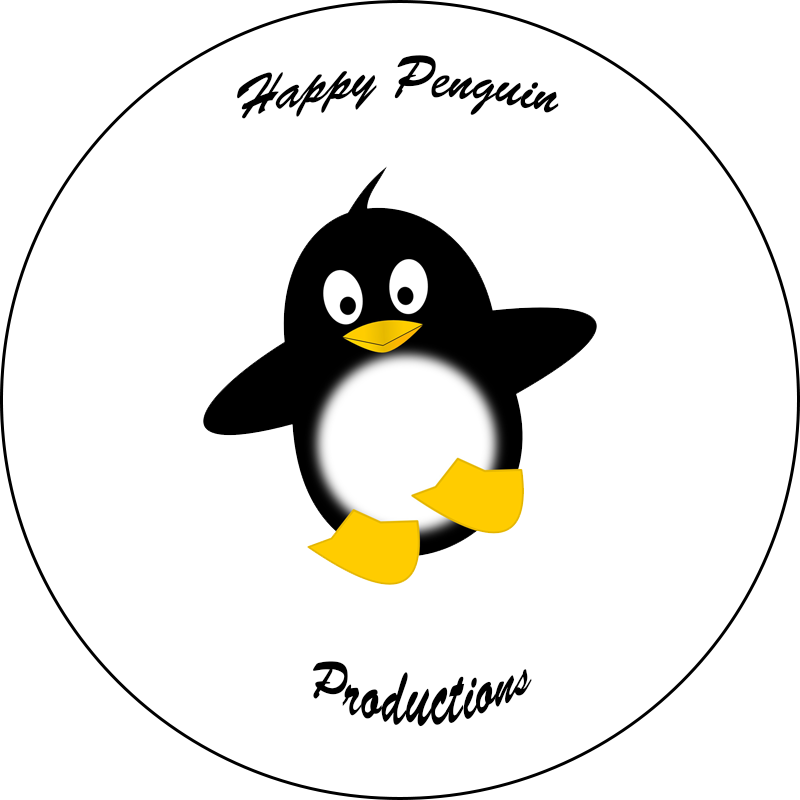
<style>
.page{position:relative;width:800px;height:800px;background:#ffffff}
.page>*{position:absolute;margin:0}
.t1{font:48px "BrushScriptStd";color:#000000}
</style>
<div class="page">
<p class="t1" style="left:237px;top:55px;width:322px;height:64px;rotate:5deg">Happy Penguin</p>
<p class="t1" style="left:312px;top:661px;width:220px;height:66px;rotate:-2deg">Productions</p>
</div>
